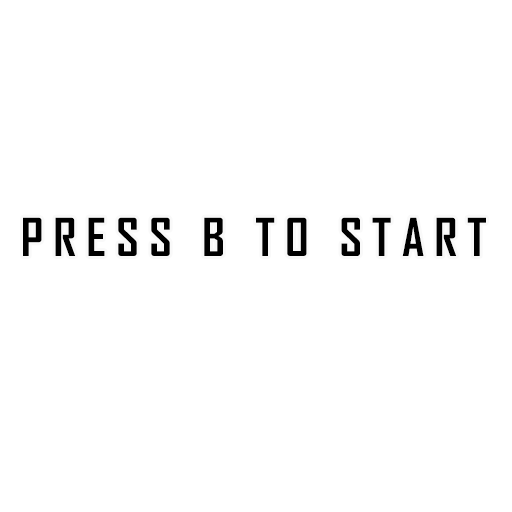
<style>
.page{position:relative;width:512px;height:512px;background:#ffffff}
.page>*{position:absolute;margin:0}
.t1{font:50px "AgencyFB-Bold";letter-spacing:0.2em;color:#000000}
</style>
<div class="page">
<p class="t1" style="left:23px;top:217px;width:463px;height:39px">PRESS B TO START</p>
</div>
